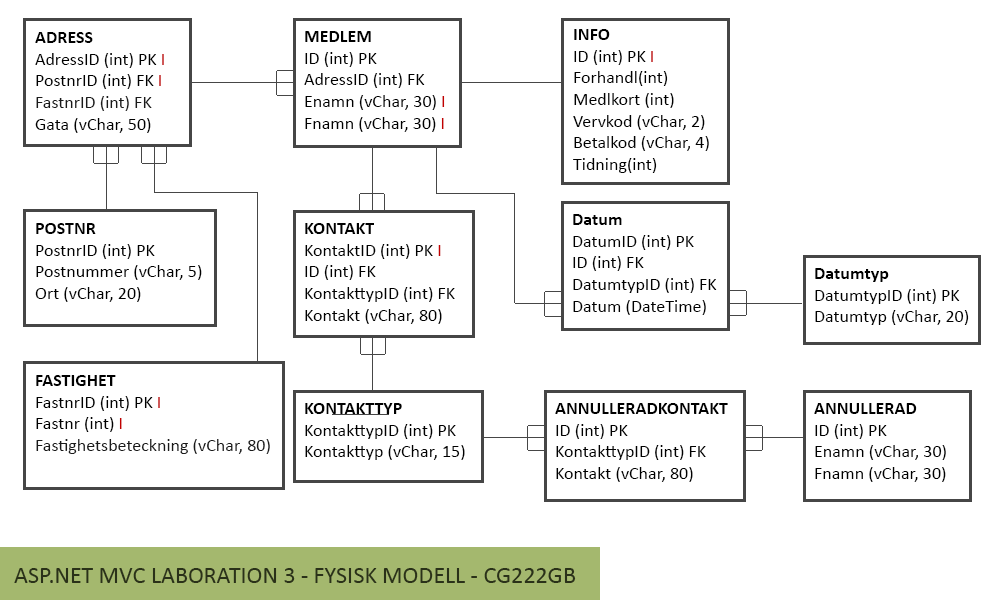
<style>
.page{position:relative;width:1000px;height:600px;background:#ffffff}
.page>*{position:absolute;margin:0}
.t1{font:18px "Calibri";color:#000000}
.t2{font:18px "Calibri-Bold";color:#000000}
.t3{font:18px "Calibri";color:#c20000}
.t4{font:18px "Calibri";color:#1a1a1a}
.t5{font:24px "Calibri";color:#2a3119}
</style>
<div class="page">
<p class="t1" style="left:573px;top:29px;width:136px;height:144px"><span class="t2">INFO<br></span>ID (int) PK <span class="t3">I<br></span>Forhandl(int)<br>Medlkort (int)<br>Vervkod (vChar, 2)<br>Betalkod (vChar, 4)<br>Tidning(int)</p>
<p class="t1" style="left:35px;top:32px;width:129px;height:101px"><span class="t2">ADRESS<br></span>AdressID (int) PK <span class="t3">I<br></span>PostnrID (int) FK <span class="t3">I<br></span><span class="t4">FastnrID (int) FK<br></span>Gata (vChar, 50)</p>
<p class="t1" style="left:304px;top:31px;width:141px;height:101px"><span class="t2">MEDLEM<br></span>ID (int) PK <br>AdressID (int) FK<br>Enamn (vChar, 30) <span class="t3">I<br></span>Fnamn (vChar, 30) <span class="t3">I</span></p>
<p class="t1" style="left:573px;top:214px;width:144px;height:101px"><span class="t2">Datum<br></span>DatumID (int) PK<br>ID (int) FK<br>DatumtypID (int) FK<br>Datum (DateTime)</p>
<p class="t1" style="left:35px;top:223px;width:167px;height:79px"><span class="t2">POSTNR<br></span>PostnrID (int) PK<br>Postnummer (vChar, 5)<br>Ort (vChar, 20)</p>
<p class="t1" style="left:305px;top:223px;width:150px;height:101px"><span class="t2">KONTAKT<br></span>KontaktID (int) PK <span class="t3">I<br></span>ID (int) FK<br>KontakttypID (int) FK<br>Kontakt (vChar, 80)</p>
<p class="t1" style="left:815px;top:268px;width:154px;height:57px"><span class="t2">Datumtyp<br></span>DatumtypID (int) PK<br>Datumtyp (vChar, 20)</p>
<p class="t4" style="left:36px;top:375px;width:234px;height:79px"><span class="t2">FASTIGHET<br></span><span class="t1">FastnrID (int) PK </span><span class="t3">I<br></span><span class="t1">Fastnr (int) </span><span class="t3">I<br></span>Fastighetsbeteckning (vChar, 80)</p>
<p class="t1" style="left:305px;top:403px;width:160px;height:57px"><span class="t2">KONTAKTTYP<br></span>KontakttypID (int) PK<br>Kontakttyp (vChar, 15)</p>
<p class="t1" style="left:555px;top:403px;width:173px;height:79px"><span class="t2">ANNULLERADKONTAKT<br></span>ID (int) PK <br>KontakttypID (int) FK<br>Kontakt (vChar, 80)</p>
<p class="t1" style="left:814px;top:403px;width:132px;height:79px"><span class="t2">ANNULLERAD<br></span>ID (int) PK <br>Enamn (vChar, 30)<br>Fnamn (vChar, 30)</p>
<p class="t5" style="left:14px;top:568px;width:562px;height:15px">ASP.NET MVC LABORATION 3 - FYSISK MODELL - CG222GB</p>
</div>
